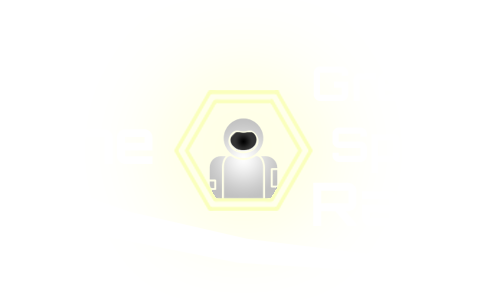
<style>
.page{position:relative;width:500px;height:300px;background:#ffffff}
.page>*{position:absolute;margin:0}
.t1{font:48px "Orbitron-Bold";color:#ffffff}
.t2{font:60px "Orbitron-Bold";color:#ffffff}
</style>
<div class="page">
<p class="t1" style="left:313px;top:64px;width:150px;height:37px">Great</p>
<p class="t2" style="left:29px;top:117px;width:124px;height:47px">The</p>
<p class="t2" style="left:313px;top:182px;width:166px;height:44px">Race</p>
</div>
